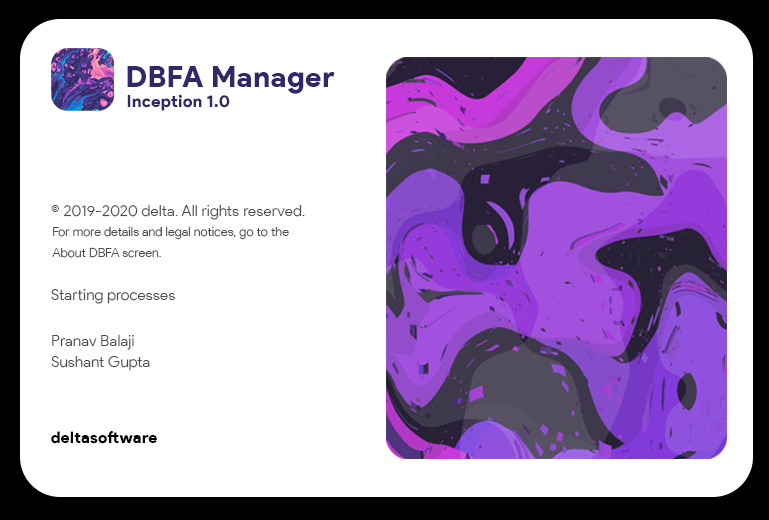
<style>
.page{position:relative;width:769px;height:520px;background:#ffffff}
.page>*{position:absolute;margin:0}
.t1{font:29.5px "ProductSans-Black";letter-spacing:0.01em;color:#312869}
.t2{font:16.7px "ProductSans-Black";letter-spacing:0.01em;color:#312869}
.t3{font:15.4px "ProductSans-Light";letter-spacing:0.01em;color:#4b4b4b}
.t4{font:12.5px/21.2px "ProductSans-Light";letter-spacing:0.01em;color:#4b4b4b}
.t5{font:15.4px/21.2px "ProductSans-Light";letter-spacing:0.01em;color:#4b4b4b}
.t6{font:16px "ProductSans-Black";letter-spacing:0.01em;color:#000000}
</style>
<div class="page">
<p class="t1" style="left:127px;top:66px;width:208px;height:28px">DBFA Manager</p>
<p class="t2" style="left:127px;top:94px;width:103px;height:17px">Inception 1.0</p>
<p class="t3" style="left:51px;top:204px;width:254px;height:16px">© 2019-2020 delta. All rights reserved.</p>
<p class="t4" style="left:52px;top:226px;width:237px;height:32px">For more details and legal notices, go to the <br>About DBFA screen.</p>
<p class="t3" style="left:51px;top:288px;width:124px;height:16px">Starting processes</p>
<p class="t5" style="left:51px;top:334px;width:99px;height:37px">Pranav Balaji<br>Sushant Gupta</p>
<p class="t6" style="left:51px;top:431px;width:106px;height:13px">deltasoftware</p>
</div>
